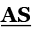
<style>
.page{position:relative;width:32px;height:32px;background:#ffffff}
.page>*{position:absolute;margin:0}
.t1{font:21px "Georgia-Bold";letter-spacing:0.01em;color:#000000;text-decoration:underline}
</style>
<div class="page">
<p class="t1" style="left:0px;top:7px;width:32px;height:20px">AS</p>
</div>
